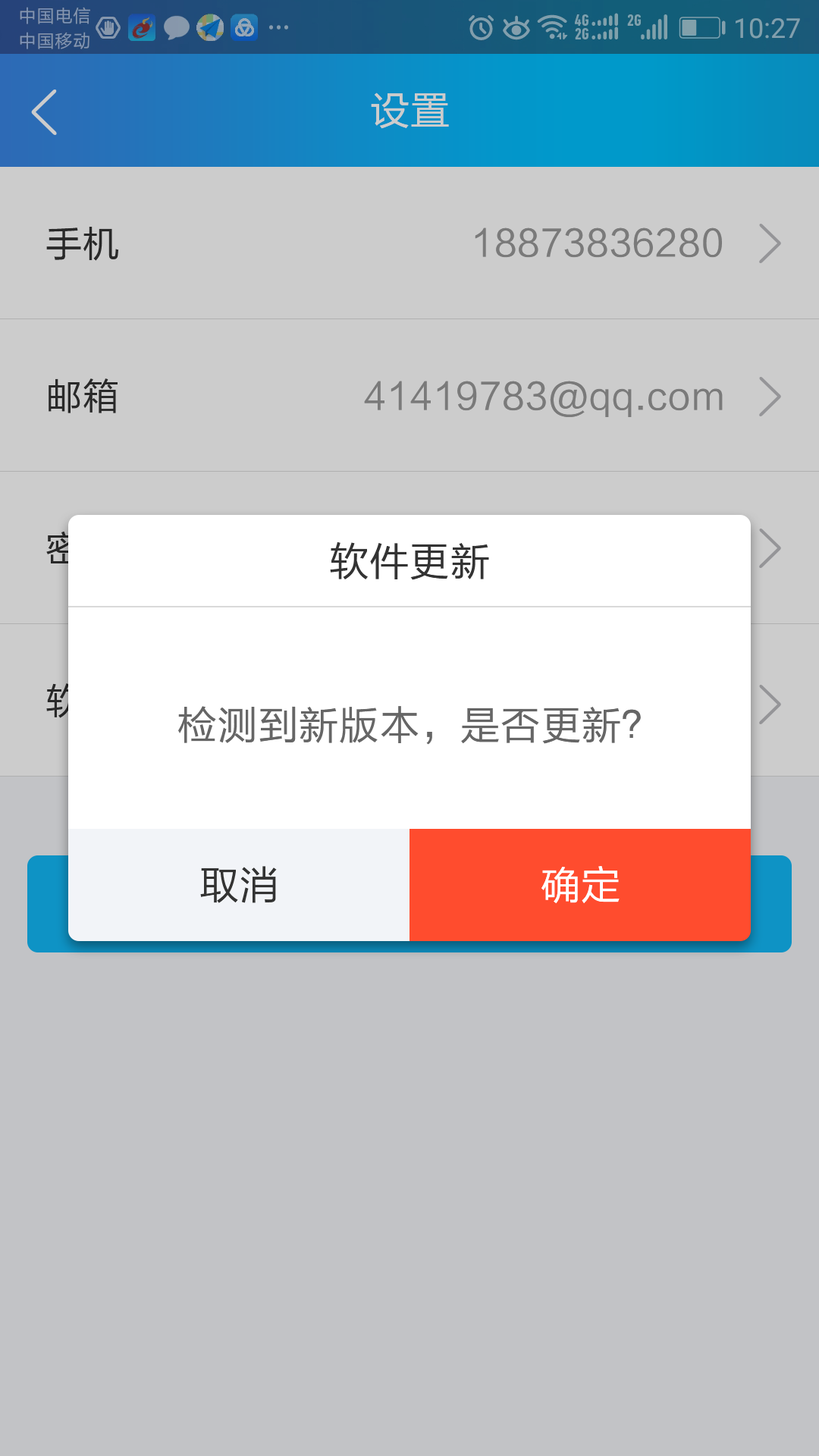
<style>
.page{position:relative;width:819px;height:1456px;background:#c2c3c6}
.page>*{position:absolute;margin:0}
.t1{font:39.4px "FZLTHK--GBK1-0";letter-spacing:0.025em;color:#cccccc}
.t2{font:36.4px "FZLTHK--GBK1-0";letter-spacing:0.025em;color:#333333}
.t3{font:36.4px "FZLTHK--GBK1-0";letter-spacing:0.025em;color:#7a7a7a}
.t4{font:36.4px "FZLTHK--GBK1-0";letter-spacing:0.025em}
.t5{font:39.4px "FZLTHK--GBK1-0";letter-spacing:0.025em;color:#333333}
.t6{font:39.4px "FZLTHK--GBK1-0";letter-spacing:0.025em;color:#666666}
.t7{font:39.4px "FZLTHK--GBK1-0";letter-spacing:0.025em;color:#ffffff}
</style>
<div class="page">
<p class="t1" style="left:371px;top:93px;width:78px;height:36px">设置</p>
<p class="t2" style="left:46px;top:227px;width:73px;height:34px">手机</p>
<p class="t3" style="left:475px;top:227px;width:247px;height:31px">18873836280</p>
<p class="t2" style="left:49px;top:378px;width:69px;height:35px">邮箱</p>
<p class="t3" style="left:364px;top:381px;width:359px;height:36px">41419783@qq.com</p>
<p class="t4" style="left:46px;top:531px;width:71px;height:34px">密码</p>
<p class="t5" style="left:330px;top:542px;width:159px;height:38px">软件更新</p>
<p class="t6" style="left:178px;top:706px;width:463px;height:39px">检测到新版本，是否更新？</p>
<p class="t5" style="left:200px;top:866px;width:77px;height:37px">取消</p>
<p class="t7" style="left:541px;top:866px;width:79px;height:37px">确定</p>
</div>
